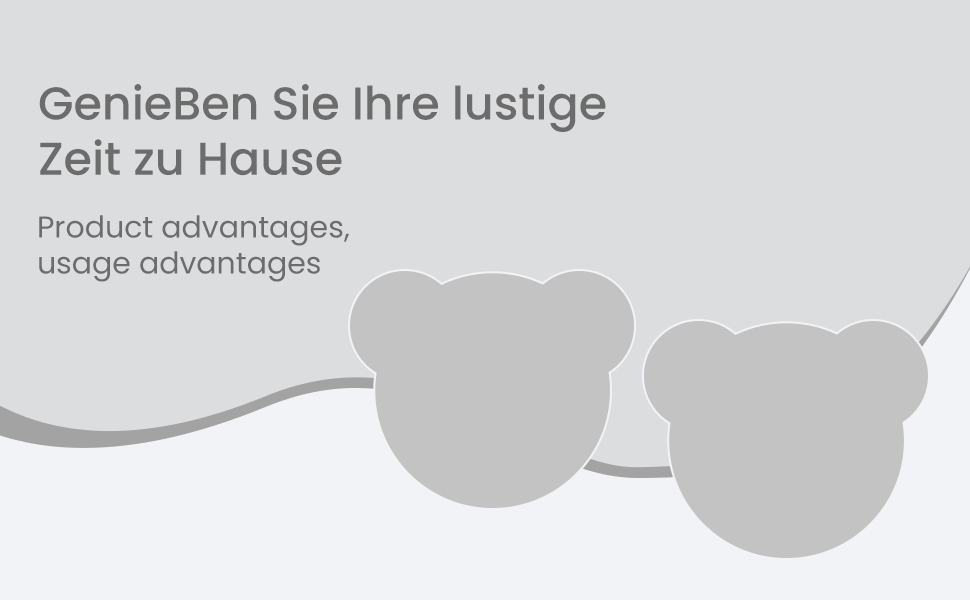
<style>
.page{position:relative;width:970px;height:600px;background:#dcdddf}
.page>*{position:absolute;margin:0}
.t1{font:46px "Poppins-Medium";color:#6c6c6c}
.t2{font:30px "Poppins-Regular";color:#6c6c6c}
</style>
<div class="page">
<p class="t1" style="left:39px;top:84px;width:567px;height:92px">GenieBen Sie Ihre lustige<br>Zeit zu Hause</p>
<p class="t2" style="left:39px;top:215px;width:310px;height:67px">Product advantages,<br>usage advantages</p>
</div>
